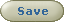
<style>
.page{position:relative;width:65px;height:22px}
.page>*{position:absolute;margin:0}
.t1{font:11px "Verdana-Bold";color:#336699}
</style>
<div class="page">
<p class="t1" style="left:18px;top:7px;width:30px;height:8px">Save</p>
</div>
